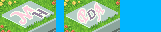
<style>
.page{position:relative;width:161px;height:32px;background:#00b5ff}
.page>*{position:absolute;margin:0}
.t1{font:17.5px "MonotypeCorsiva";color:#ffcede;font-weight:bold;scale:0.88 1}
.t2{font:18px "MonotypeCorsiva";color:#ffcede;font-weight:bold}
.t3{font:12.6px "Arial-BoldMT";color:#94849c;scale:0.88 1}
</style>
<div class="page">
<p class="t1" style="left:95px;top:3px;width:9px;height:18px;rotate:-50deg">A</p>
<p class="t2" style="left:78px;top:9px;width:10px;height:14px;rotate:-57deg">P</p>
<p class="t3" style="left:87px;top:9px;width:9px;height:11px;rotate:-30deg">D</p>
</div>
